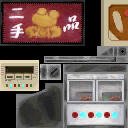
<style>
.page{position:relative;width:128px;height:128px}
.page>*{position:absolute;margin:0}
.t1{font:17px "Otsutome_font-Bold";color:#efddf0;font-style:italic}
.t2{font:34px "SJlingyunzhangcao";color:#f5e9f5;font-style:italic}
.t3{font:17px "Otsutome_font-Bold";color:#ffffff;font-style:italic}
</style>
<div class="page">
<p class="t1" style="left:8px;top:8px;width:16px;height:11px">二</p>
<p class="t2" style="left:63px;top:15px;width:17px;height:17px">品</p>
<p class="t3" style="left:10px;top:23px;width:14px;height:16px">手</p>
</div>
